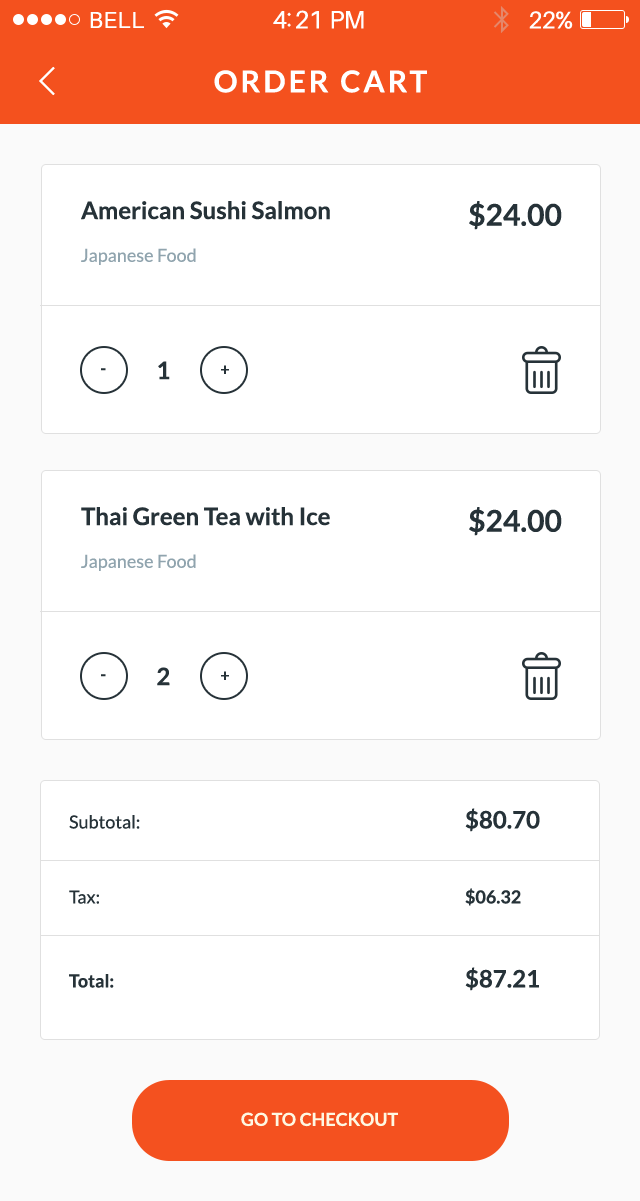
<style>
.page{position:relative;width:640px;height:1201px;background:#ffffff}
.page>*{position:absolute;margin:0}
.t1{font:23px "Aileron-Regular";letter-spacing:0.02em;color:#ffffff}
.t2{font:25px "Aileron-Regular";letter-spacing:-0.02em;color:#ffffff}
.t3{font:24px "Aileron-Regular";letter-spacing:-0.02em;color:#ffffff}
.t4{font:30px "Lato-Bold";letter-spacing:0.1em;color:#ffffff;text-transform:uppercase}
.t5{font:24px "Lato-Bold";color:#263238}
.t6{font:30px "Lato-Bold";color:#263238}
.t7{font:18px "Lato-Regular";color:#90a4ae}
.t8{font:16px "Lato-Bold";color:#263238}
.t9{font:18px "Lato-Regular";color:#263238}
.t10{font:24px "Lato-Bold";color:#263238;text-transform:uppercase}
.t11{font:18px "Lato-Bold";color:#263238;text-transform:uppercase}
.t12{font:18px "Lato-Bold";color:#263238}
.t13{font:18px "Lato-Bold";color:#fef8e2;text-transform:uppercase}
</style>
<div class="page">
<p class="t1" style="left:90px;top:12px;width:54px;height:16px">BELL</p>
<p class="t2" style="left:273px;top:10px;width:91px;height:19px">4:21 PM</p>
<p class="t3" style="left:529px;top:11px;width:44px;height:18px">22%</p>
<p class="t4" style="left:214px;top:70px;width:213px;height:23px">Order Cart</p>
<p class="t5" style="left:81px;top:201px;width:249px;height:19px">American Sushi Salmon</p>
<p class="t6" style="left:469px;top:201px;width:93px;height:29px">$24.00</p>
<p class="t7" style="left:81px;top:248px;width:115px;height:17px">Japanese Food</p>
<p class="t5" style="left:158px;top:361px;width:12px;height:19px">1</p>
<p class="t8" style="left:221px;top:365px;width:8px;height:9px">+</p>
<p class="t8" style="left:101px;top:368px;width:5px;height:3px">-</p>
<p class="t5" style="left:81px;top:507px;width:249px;height:19px">Thai Green Tea with Ice</p>
<p class="t6" style="left:469px;top:507px;width:93px;height:29px">$24.00</p>
<p class="t7" style="left:81px;top:554px;width:115px;height:17px">Japanese Food</p>
<p class="t8" style="left:101px;top:674px;width:5px;height:3px">-</p>
<p class="t5" style="left:157px;top:667px;width:13px;height:19px">2</p>
<p class="t8" style="left:221px;top:671px;width:8px;height:9px">+</p>
<p class="t9" style="left:69px;top:808px;width:471px;height:24px">Subtotal:<span class="t10">          $80.70</span></p>
<p class="t11" style="left:69px;top:888px;width:452px;height:18px"><span class="t9">Tax:           </span>$06.32</p>
<p class="t10" style="left:69px;top:967px;width:470px;height:24px"><span class="t12">Total</span><span class="t11">:</span>          $87.21</p>
<p class="t13" style="left:241px;top:1112px;width:157px;height:15px">Go To Checkout</p>
</div>
